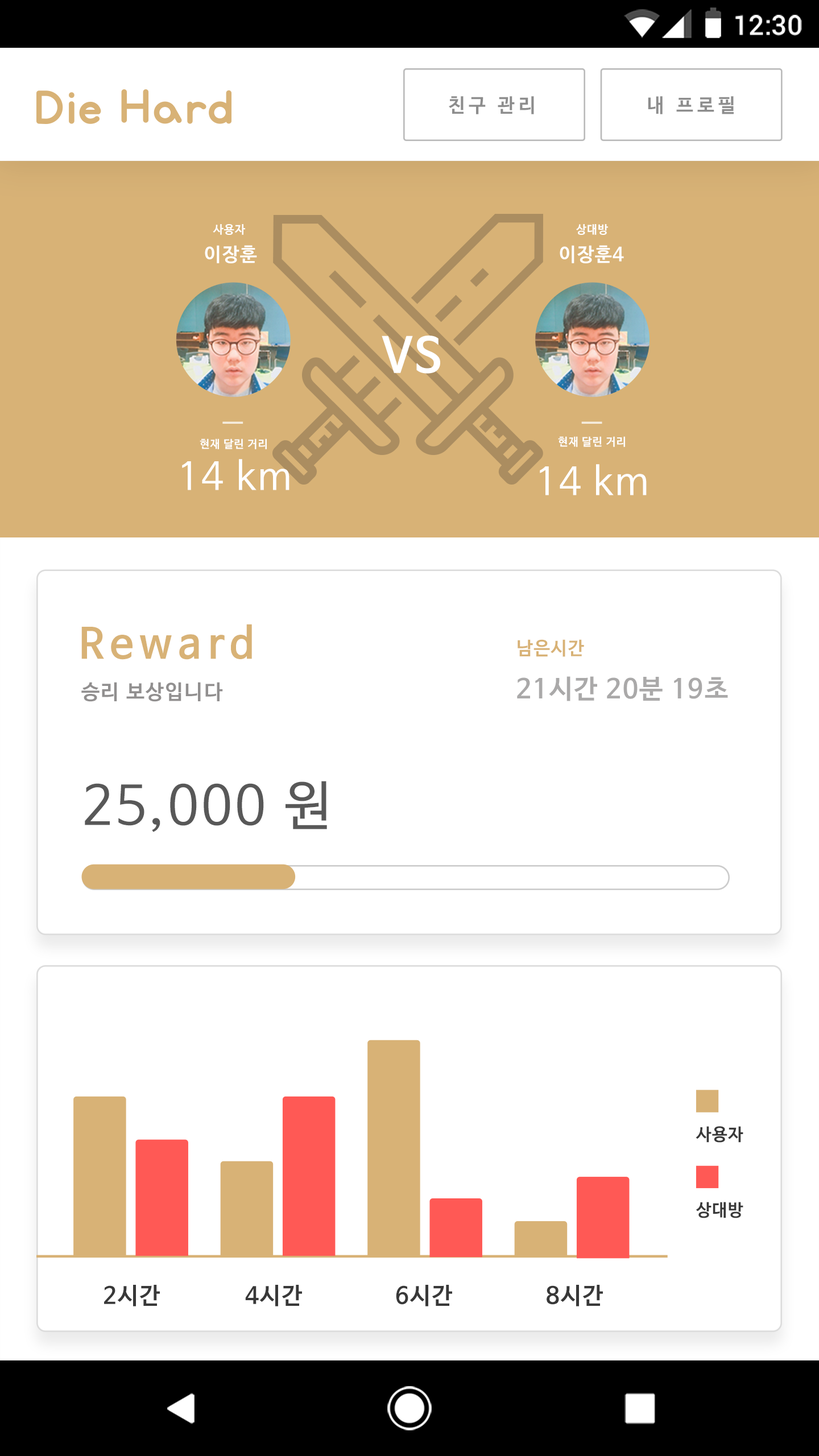
<style>
.page{position:relative;width:819px;height:1456px;background:#ffffff}
.page>*{position:absolute;margin:0}
.t1{font:27.3px "Roboto-Medium";color:#ffffff}
.t2{font:19.3px "NanumBarunGothicBold";letter-spacing:0.2em;color:#8d8d8d}
.t3{font:11.6px "NanumBarunGothicBold";letter-spacing:0.05em;color:#ffffff}
.t4{font:18.9px "NanumBarunGothicBold";letter-spacing:0.05em;color:#ffffff}
.t5{font:47.8px "NanumBarunGothicBold";letter-spacing:0.05em;color:#ffffff}
.t6{font:11.1px "NanumBarunGothicBold";letter-spacing:0.05em;color:#ffffff}
.t7{font:37.9px "NanumBarunGothic";letter-spacing:0.05em;color:#ffffff}
.t8{font:41.6px "NanumBarunGothicBold";letter-spacing:0.16em;color:#d8b276}
.t9{font:18.2px "NanumBarunGothicBold";letter-spacing:0.05em;color:#d8b276}
.t10{font:26.5px "NanumBarunGothicBold";letter-spacing:0.05em;color:#aaa9a9}
.t11{font:20.5px "NanumBarunGothicBold";letter-spacing:0.06em;color:#918f8f}
.t12{font:53.6px "NanumBarunGothic";letter-spacing:0.05em;color:#585858}
.t13{font:17px "NanumBarunGothicBold";letter-spacing:0.05em;color:#383838}
.t14{font:23.2px "NanumBarunGothicBold";letter-spacing:0.05em;color:#383838}
</style>
<div class="page">
<p class="t1" style="left:735px;top:15px;width:67px;height:21px">12:30</p>
<p class="t2" style="left:449px;top:96px;width:85px;height:18px">친구 관리</p>
<p class="t2" style="left:648px;top:96px;width:86px;height:18px">내 프로필</p>
<p class="t3" style="left:213px;top:224px;width:32px;height:11px">사용자</p>
<p class="t3" style="left:576px;top:224px;width:32px;height:11px">상대방</p>
<p class="t4" style="left:205px;top:245px;width:52px;height:18px">이장훈</p>
<p class="t4" style="left:560px;top:245px;width:64px;height:18px">이장훈4</p>
<p class="t5" style="left:382px;top:336px;width:58px;height:38px">VS</p>
<p class="t6" style="left:558px;top:436px;width:67px;height:11px">현재 달린 거리</p>
<p class="t6" style="left:200px;top:439px;width:67px;height:10px">현재 달린 거리</p>
<p class="t7" style="left:182px;top:459px;width:107px;height:31px">14 km</p>
<p class="t7" style="left:540px;top:464px;width:107px;height:31px">14 km</p>
<p class="t8" style="left:81px;top:624px;width:171px;height:36px">Reward</p>
<p class="t9" style="left:518px;top:639px;width:66px;height:18px">남은시간</p>
<p class="t10" style="left:517px;top:676px;width:211px;height:25px">21시간 20분 19초</p>
<p class="t11" style="left:81px;top:682px;width:142px;height:20px">승리 보상입니다</p>
<p class="t12" style="left:85px;top:781px;width:242px;height:51px">25,000 원</p>
<p class="t13" style="left:696px;top:1126px;width:47px;height:17px">사용자</p>
<p class="t13" style="left:696px;top:1202px;width:47px;height:16px">상대방</p>
<p class="t14" style="left:104px;top:1285px;width:56px;height:21px">2시간</p>
<p class="t14" style="left:245px;top:1285px;width:57px;height:21px">4시간</p>
<p class="t14" style="left:396px;top:1285px;width:56px;height:21px">6시간</p>
<p class="t14" style="left:547px;top:1285px;width:56px;height:21px">8시간</p>
</div>
